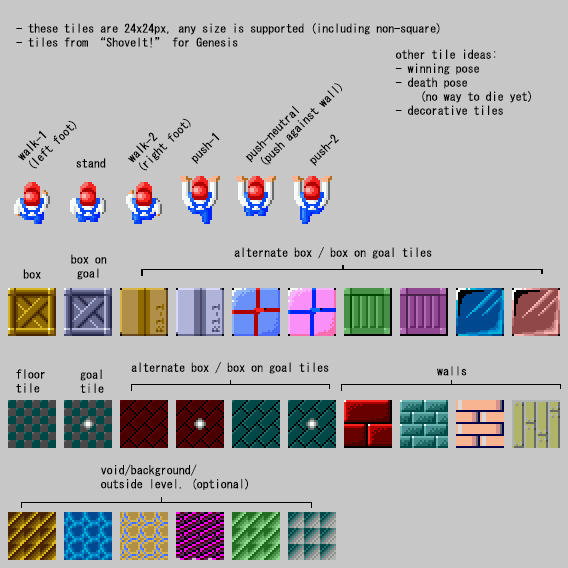
<style>
.page{position:relative;width:568px;height:568px;background:#c7c7c7}
.page>*{position:absolute;margin:0}
.t1{font:12px/14px "MS-Gothic";color:#000000}
.t2{font:12px "MS-Gothic";color:#000000}
</style>
<div class="page">
<p class="t1" style="left:16px;top:23px;width:424px;height:25px">- these tiles are 24x24px, any size is supported (including non-square)<br>- tiles from “ShoveIt!” for Genesis</p>
<p class="t1" style="left:395px;top:49px;width:136px;height:66px">other tile ideas:<br>- winning pose<br>- death pose<br>    (no way to die yet)<br>- decorative tiles</p>
<p class="t1" style="left:245px;top:83px;width:97px;height:82px;rotate:-45deg">push-neutral<br> (push against wall)</p>
<p class="t1" style="left:18px;top:121px;width:59px;height:48px;rotate:-45deg">walk-1<br>(left foot)</p>
<p class="t1" style="left:128px;top:118px;width:63px;height:53px;rotate:-45deg">walk-2<br>(right foot)</p>
<p class="t2" style="left:191px;top:132px;width:29px;height:32px;rotate:-45deg">push-1</p>
<p class="t2" style="left:309px;top:134px;width:30px;height:32px;rotate:-45deg">push-2</p>
<p class="t2" style="left:76px;top:158px;width:30px;height:10px">stand</p>
<p class="t1" style="left:71px;top:254px;width:36px;height:26px;text-align:center">box on<br>goal</p>
<p class="t2" style="left:234px;top:247px;width:198px;height:12px">alternate box / box on goal tiles</p>
<p class="t2" style="left:23px;top:269px;width:18px;height:10px">box</p>
<p class="t2" style="left:131px;top:362px;width:198px;height:12px">alternate box / box on goal tiles</p>
<p class="t2" style="left:437px;top:366px;width:30px;height:10px">walls</p>
<p class="t1" style="left:16px;top:369px;width:29px;height:24px">floor<br>tile</p>
<p class="t1" style="left:80px;top:369px;width:24px;height:24px">goal<br>tile</p>
<p class="t1" style="left:101px;top:464px;width:147px;height:26px">void/background/<br>outside level. (optional)</p>
</div>
